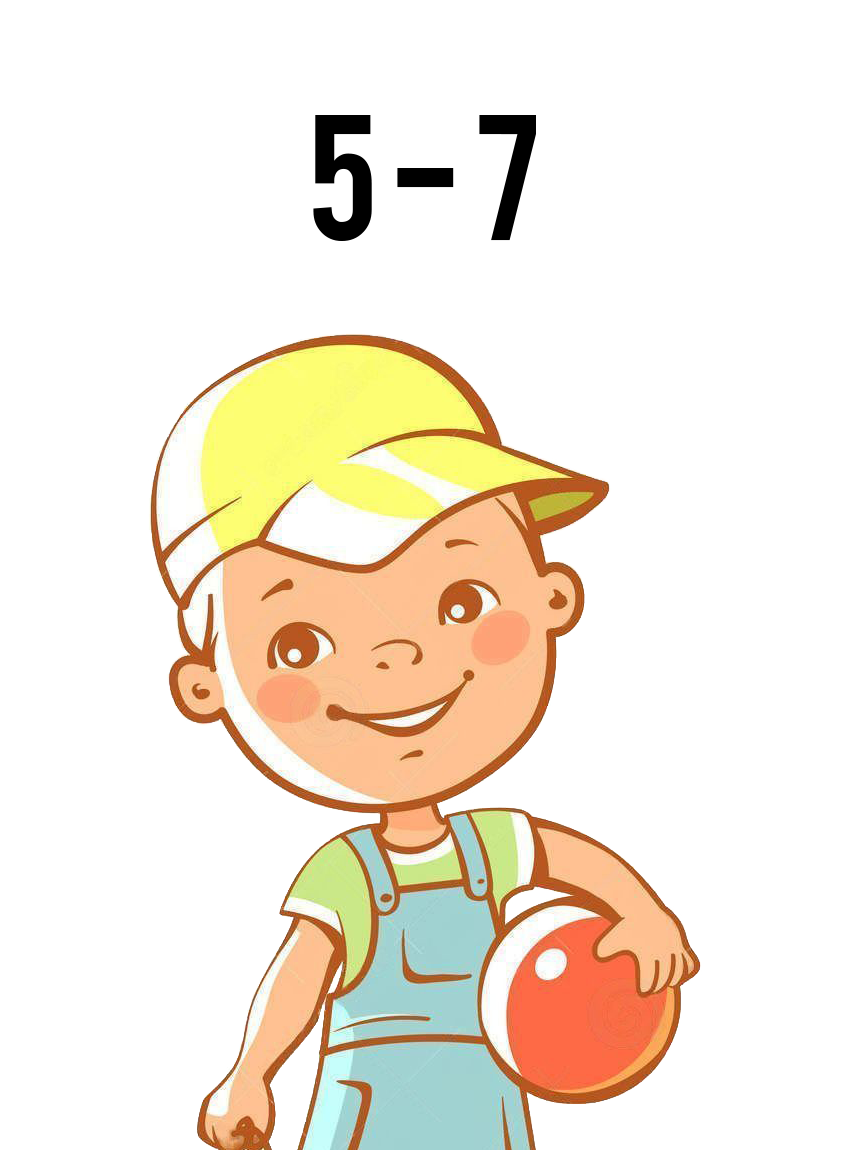
<style>
.page{position:relative;width:850px;height:1150px;background:#ffffff}
.page>*{position:absolute;margin:0}
.t1{font:140px "Bebas";color:#000000}
</style>
<div class="page">
<p class="t1" style="left:313px;top:115px;width:223px;height:126px">5 - 7</p>
</div>
